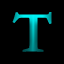
<style>
.page{position:relative;width:64px;height:64px;background:#000000}
.page>*{position:absolute;margin:0}
.t1{font:60px "Garamond-Bold"}
</style>
<div class="page">
<p class="t1" style="left:12px;top:12px;width:40px;height:40px">T</p>
</div>
